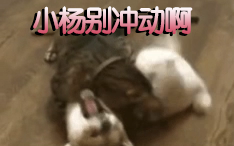
<style>
.page{position:relative;width:234px;height:146px}
.page>*{position:absolute;margin:0}
.t1{font:28px "STYuanti-TC-Regular";letter-spacing:-0.08em;font-weight:bold}
</style>
<div class="page">
<p class="t1" style="left:33px;top:6px;width:160px;height:29px">小杨别冲动啊</p>
</div>
